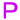
<style>
.page{position:relative;width:20px;height:20px;background:#ffffff}
.page>*{position:absolute;margin:0}
.t1{font:24px "MS-Gothic";color:#ca00ef}
</style>
<div class="page">
<p class="t1" style="left:3px;top:2px;width:15px;height:17px">Ｐ</p>
</div>
